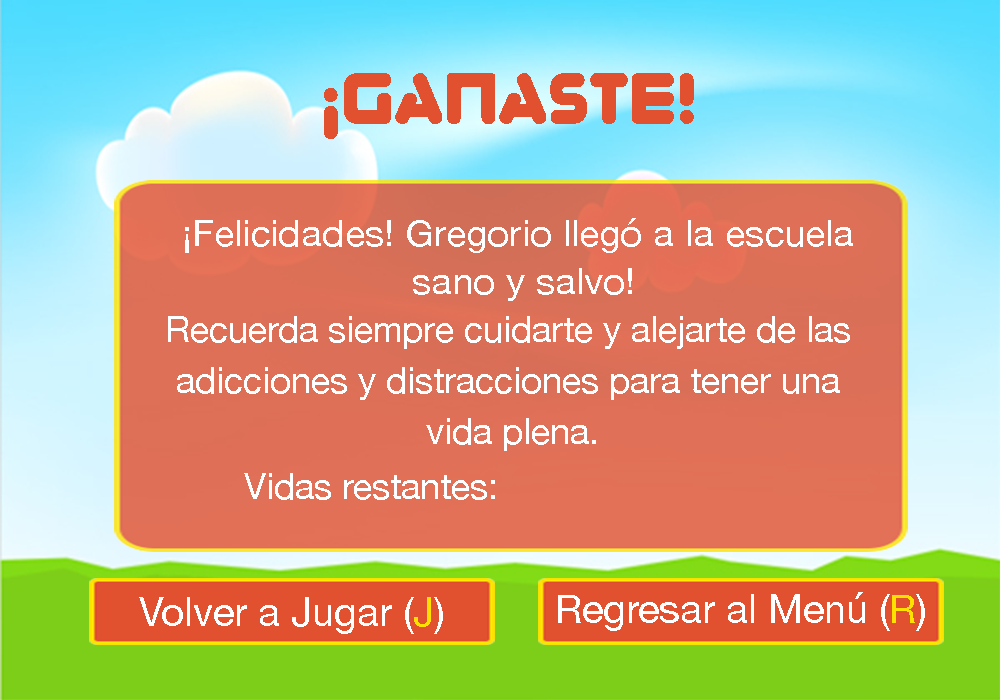
<style>
.page{position:relative;width:1000px;height:700px}
.page>*{position:absolute;margin:0}
.t1{font:72px "Zorque-Regular";color:#e15130}
.t2{font:36px/48px "HelveticaNeue";color:#ffffff;scale:1.06 1}
.t3{font:36px/50.8px "HelveticaNeue";color:#ffffff}
.t4{font:36px "HelveticaNeue";color:#ffffff}
.t5{font:40px "HelveticaNeue";color:#ffffff}
.t6{font:40px "HelveticaNeue";color:#ffe100}
</style>
<div class="page">
<p class="t1" style="left:324px;top:73px;width:370px;height:66px">¡GANASTE!</p>
<p class="t2" style="left:185px;top:218px;width:668px;height:83px;text-align:center">¡Felicidades! Gregorio llegó a la escuela <br>sano y salvo!</p>
<p class="t3" style="left:168px;top:316px;width:682px;height:135px;text-align:center">Recuerda siempre cuidarte y alejarte de las <br>adicciones y distracciones para tener una <br>vida plena.</p>
<p class="t4" style="left:244px;top:473px;width:251px;height:27px">Vidas restantes:</p>
<p class="t5" style="left:558px;top:592px;width:367px;height:39px">Regresar al Menú (<span class="t6">R</span>)</p>
<p class="t5" style="left:139px;top:597px;width:304px;height:37px">Volver a Jugar (<span class="t6">J</span>)</p>
</div>
